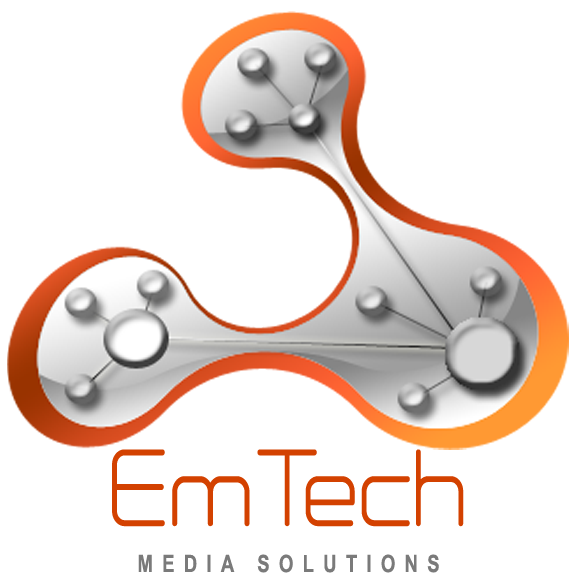
<style>
.page{position:relative;width:576px;height:576px;background:#ffffff}
.page>*{position:absolute;margin:0}
.t1{font:95.1px "Neogrey";letter-spacing:0.02em;color:#d34100;scale:0.82 1}
.t2{font:23.8px "Arial-BoldMT";letter-spacing:0.5em;color:#666666;scale:0.78 1}
</style>
<div class="page">
<p class="t1" style="left:112px;top:449px;width:352px;height:78px">EmTech</p>
<p class="t2" style="left:138px;top:554px;width:301px;height:19px">MEDIA SOLUTIONS</p>
</div>
